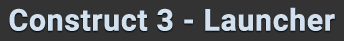
<style>
.page{position:relative;width:344px;height:41px;background:#333333}
.page>*{position:absolute;margin:0}
.t1{font:30px "Roboto-Bold";color:#d2e1f0;font-weight:bold}
</style>
<div class="page">
<p class="t1" style="left:9px;top:7px;width:326px;height:24px">Construct 3 - Launcher</p>
</div>
